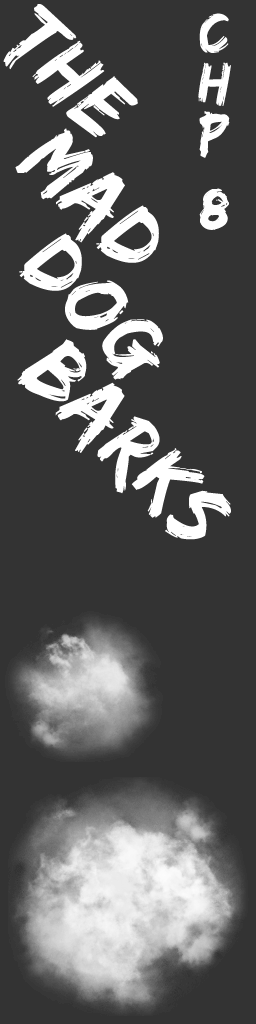
<style>
.page{position:relative;width:256px;height:1024px;background:#333333}
.page>*{position:absolute;margin:0}
.t1{font:91.3px "EdoSZ";letter-spacing:0.03em;color:#ffffff;scale:0.96 1}
.t2{font:60px/25.1px "EdoSZ";letter-spacing:0.03em;color:#ffffff}
</style>
<div class="page">
<p class="t1" style="left:3px;top:4px;width:135px;height:134px;rotate:45deg">The</p>
<p class="t2" style="left:198px;top:13px;width:33px;height:217px;text-align:center">C<br><br>h<br><br>P<br><br><br>8</p>
<p class="t1" style="left:15px;top:128px;width:144px;height:135px;rotate:45deg">Mad</p>
<p class="t1" style="left:19px;top:233px;width:144px;height:147px;rotate:45deg">Dog</p>
<p class="t1" style="left:17px;top:339px;width:214px;height:201px;rotate:45deg">Barks</p>
</div>
